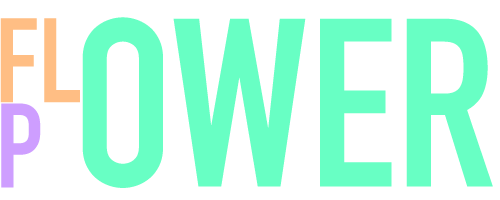
<style>
.page{position:relative;width:500px;height:200px;background:#ffffff}
.page>*{position:absolute;margin:0}
.t1{font:235.3px "DINCondensed-Bold";color:#68ffc4}
.t2{font:117.7px "DINCondensed-Bold";color:#ffbe84}
.t3{font:117.7px "DINCondensed-Bold";color:#ce9eff}
</style>
<div class="page">
<p class="t1" style="left:82px;top:17px;width:411px;height:171px">OWER</p>
<p class="t2" style="left:0px;top:18px;width:80px;height:85px">FL</p>
<p class="t3" style="left:1px;top:103px;width:40px;height:85px">P</p>
</div>
